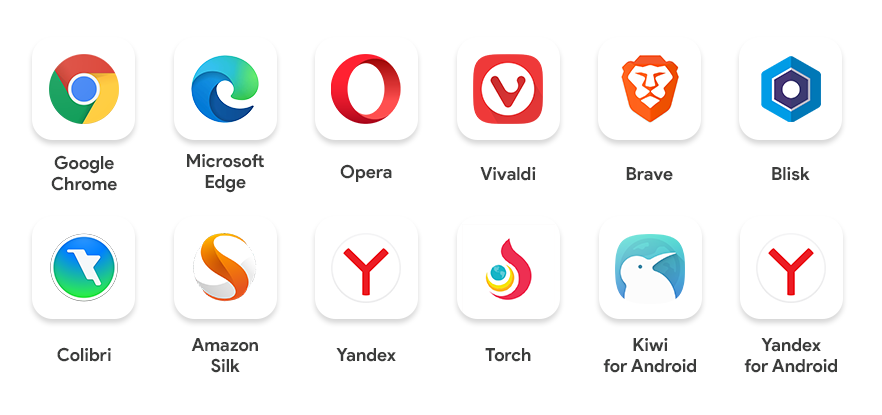
<style>
.page{position:relative;width:882px;height:415px;background:#ffffff}
.page>*{position:absolute;margin:0}
.t1{font:18px "ProductSans-Bold";color:#3b3c3b}
</style>
<div class="page">
<p class="t1" style="left:51px;top:155px;width:66px;height:36px;text-align:center">Google<br>Chrome</p>
<p class="t1" style="left:187px;top:154px;width:77px;height:39px;text-align:center">Microsoft<br>Edge</p>
<p class="t1" style="left:340px;top:164px;width:52px;height:18px">Opera</p>
<p class="t1" style="left:480px;top:167px;width:56px;height:14px">Vivaldi</p>
<p class="t1" style="left:626px;top:167px;width:47px;height:14px">Brave</p>
<p class="t1" style="left:772px;top:167px;width:38px;height:14px">Blisk</p>
<p class="t1" style="left:191px;top:338px;width:67px;height:35px;text-align:center">Amazon<br>Silk</p>
<p class="t1" style="left:603px;top:338px;width:93px;height:35px;text-align:center">Kiwi<br>for Android</p>
<p class="t1" style="left:744px;top:338px;width:93px;height:35px;text-align:center">Yandex<br>for Android</p>
<p class="t1" style="left:57px;top:347px;width:54px;height:15px">Colibri</p>
<p class="t1" style="left:336px;top:348px;width:60px;height:14px">Yandex</p>
<p class="t1" style="left:485px;top:348px;width:46px;height:14px">Torch</p>
</div>
